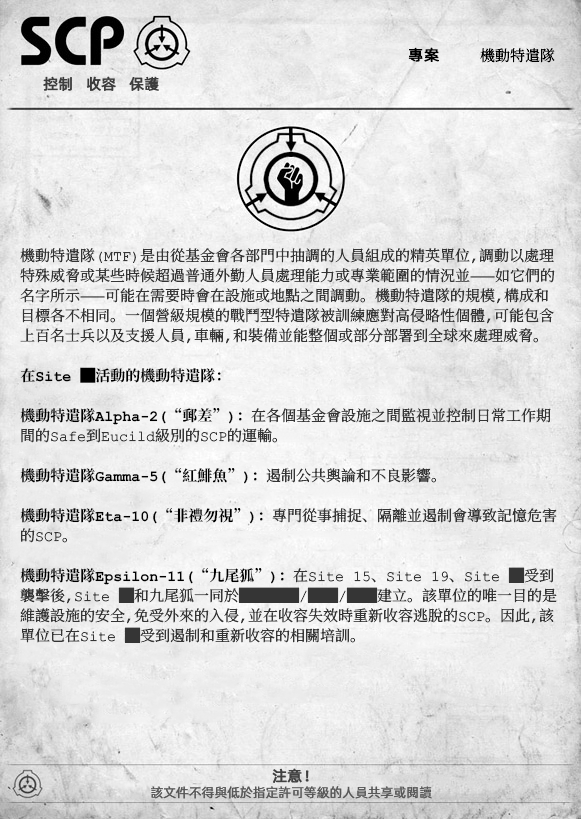
<style>
.page{position:relative;width:581px;height:819px}
.page>*{position:absolute;margin:0}
.t1{font:15px "ContainmentBreach-Regular";color:#000000}
.t2{font:15px "AlibabaPuHuiTiR";color:#000000;font-weight:bold}
.t3{font:15px "AlibabaPuHuiTiR";color:#3d3d3d;font-weight:bold}
.t4{font:15px/20px "ContainmentBreach-Regular";color:#353535}
.t5{font:15px/20px "ContainmentBreach-Bold";color:#000000}
.t6{font:15px "AlibabaPuHuiTiR";color:#414141;font-weight:bold}
.t7{font:13px "AlibabaPuHuiTiR";color:#575757}
</style>
<div class="page">
<p class="t1" style="left:408px;top:47px;width:147px;height:16px"><span class="t2">專案  </span>機動特遣隊</p>
<p class="t3" style="left:43px;top:76px;width:116px;height:15px">控制   收容   保護</p>
<p class="t4" style="left:20px;top:248px;width:537px;height:395px">機動特遣隊（MTF）是由從基金會各部門中抽調的人員組成的精英單位，調動以處理<br>特殊威脅或某些時候超過普通外勤人員處理能力或專業範圍的情況並——如它們的<br>名字所示——可能在需要時會在設施或地點之間調動。機動特遣隊的規模，構成和<br>目標各不相同。一個營級規模的戰鬥型特遣隊被訓練應對高侵略性個體，可能包含<br>上百名士兵以及支援人員，車輛，和裝備並能整個或部分部署到全球來處理威脅。<br><br><span class="t5">在Site █活動的機動特遣隊：<br><br>機動特遣隊Alpha-2(“郵差”)：</span>在各個基金會設施之間監視並控制日常工作期<br>間的Safe到Eucild級別的SCP的運輸。<br><br><span class="t5">機動特遣隊Gamma-5(“紅鯡魚”)：</span>遏制公共輿論和不良影響。<br><br><span class="t5">機動特遣隊Eta-10(“非禮勿視”)：</span>專門從事捕捉、隔離並遏制會導致記憶危害<br>的SCP。<br><br><span class="t5">機動特遣隊Epsilon-11(“九尾狐”)：</span>在Site 15、Site 19、Site █受到<br>襲擊後，Site █和九尾狐一同於████/██/██建立。該單位的唯一目的是<br>維護設施的安全，免受外來的入侵，並在收容失效時重新收容逃脫的SCP。因此，該<br>單位已在Site █受到遏制和重新收容的相關培訓。</p>
<p class="t6" style="left:272px;top:768px;width:37px;height:15px">注意！</p>
<p class="t7" style="left:151px;top:786px;width:281px;height:13px">該文件不得與低於指定許可等級的人員共享或閱讀</p>
</div>
